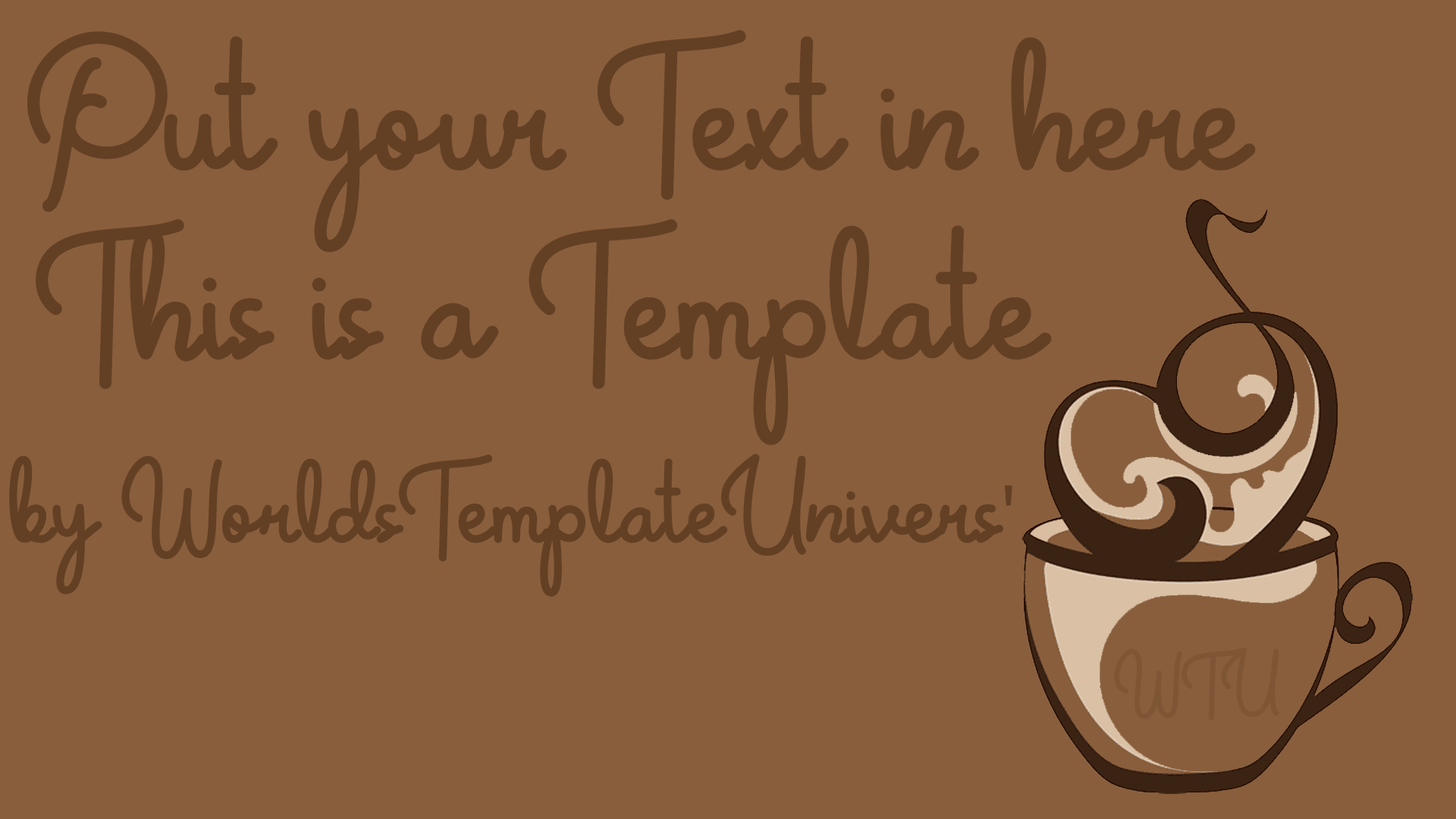
<style>
.page{position:relative;width:1456px;height:819px;background:#895e3c}
.page>*{position:absolute;margin:0}
.t1{font:132.7px "CrunchyPasta";color:#634024}
.t2{font:132.7px/20.7px "CrunchyPasta";color:#634024}
.t3{font:83.4px/20.7px "CrunchyPasta";color:#634024}
.t4{font:83.4px/20.7px "MyriadPro-Regular";color:#634024}
.t5{font:56.9px "CrunchyPasta";color:#7e5636}
</style>
<div class="page">
<p class="t1" style="left:27px;top:30px;width:1229px;height:223px">Put your Text in here</p>
<p class="t2" style="left:36px;top:219px;width:1016px;height:226px">This is a Template</p>
<p class="t3" style="left:9px;top:453px;width:1003px;height:144px">by WorldsTemplateUnivers<span class="t4">'</span></p>
<p class="t5" style="left:1114px;top:647px;width:165px;height:73px">WTU</p>
</div>
